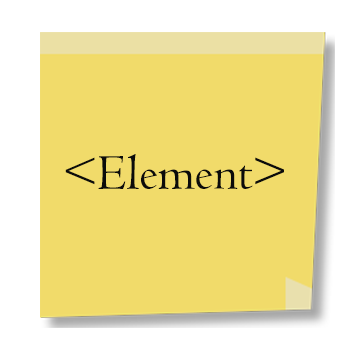
<style>
.page{position:relative;width:350px;height:350px;background:#f1db6a}
.page>*{position:absolute;margin:0}
.t1{font:51.6px "Centaur";color:#0b0b0b}
</style>
<div class="page">
<p class="t1" style="left:65px;top:154px;width:219px;height:35px">&lt;Element&gt;</p>
</div>
